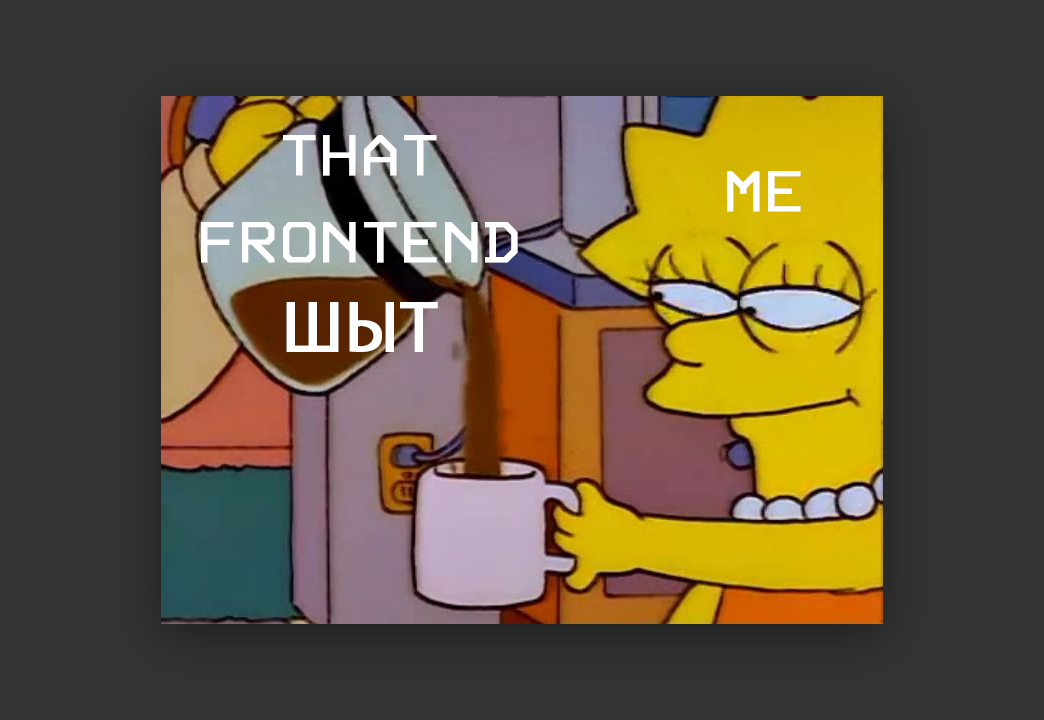
<style>
.page{position:relative;width:1044px;height:720px;background:#333333}
.page>*{position:absolute;margin:0}
.t1{font:72px "3270Medium";color:#fefefe;font-weight:bold}
.t2{font:72px "MyriadPro-Regular";color:#fefefe;font-weight:bold}
</style>
<div class="page">
<p class="t1" style="left:201px;top:135px;width:317px;height:217px;text-align:center">THAT<br>FRONTEND<br><span class="t2">ШЫТ</span></p>
<p class="t1" style="left:727px;top:171px;width:74px;height:41px">ME</p>
</div>
